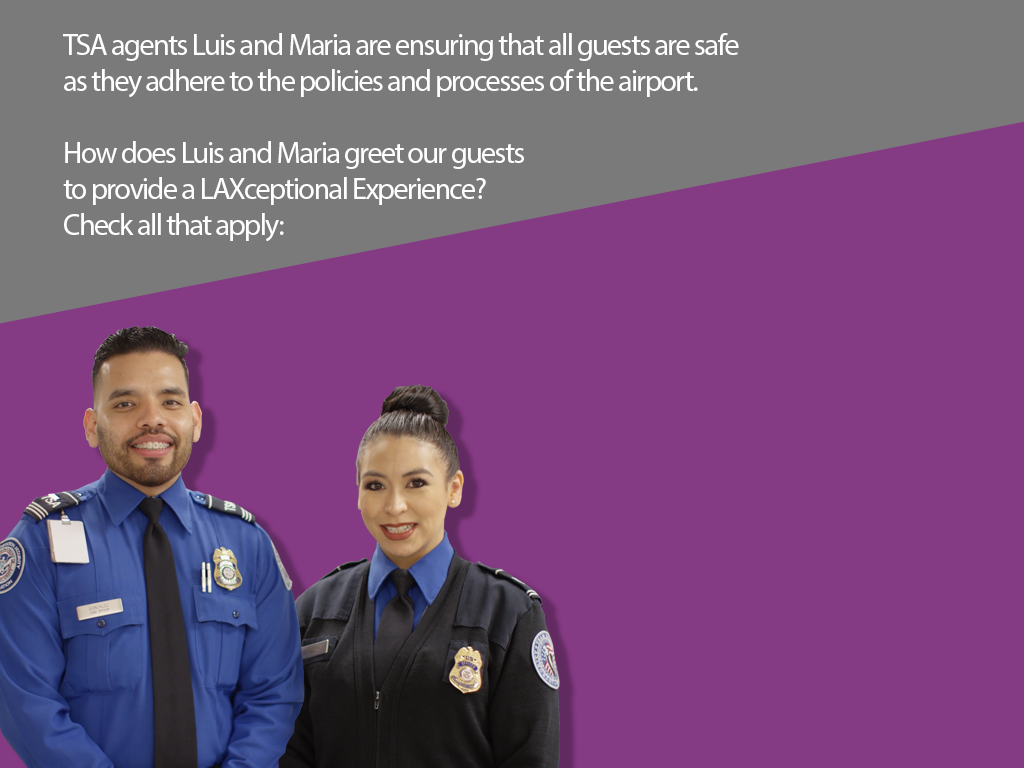
<style>
.page{position:relative;width:1024px;height:768px;background:#853a84}
.page>*{position:absolute;margin:0}
.t1{font:30px/36px "MyriadPro-Regular";letter-spacing:-0.05em;color:#ffffff}
</style>
<div class="page">
<p class="t1" style="left:63px;top:33px;width:676px;height:209px">TSA agents Luis and Maria are ensuring that all guests are safe <br>as they adhere to the policies and processes of the airport. <br><br>How does Luis and Maria greet our guests<br>to provide a LAXceptional Experience?<br>Check all that apply:</p>
</div>
